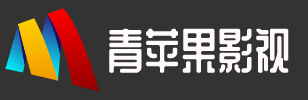
<style>
.page{position:relative;width:308px;height:100px;background:#333333}
.page>*{position:absolute;margin:0}
.t1{font:48px "butter";color:#fefafa}
</style>
<div class="page">
<p class="t1" style="left:109px;top:28px;width:180px;height:45px">青苹果影视</p>
</div>
